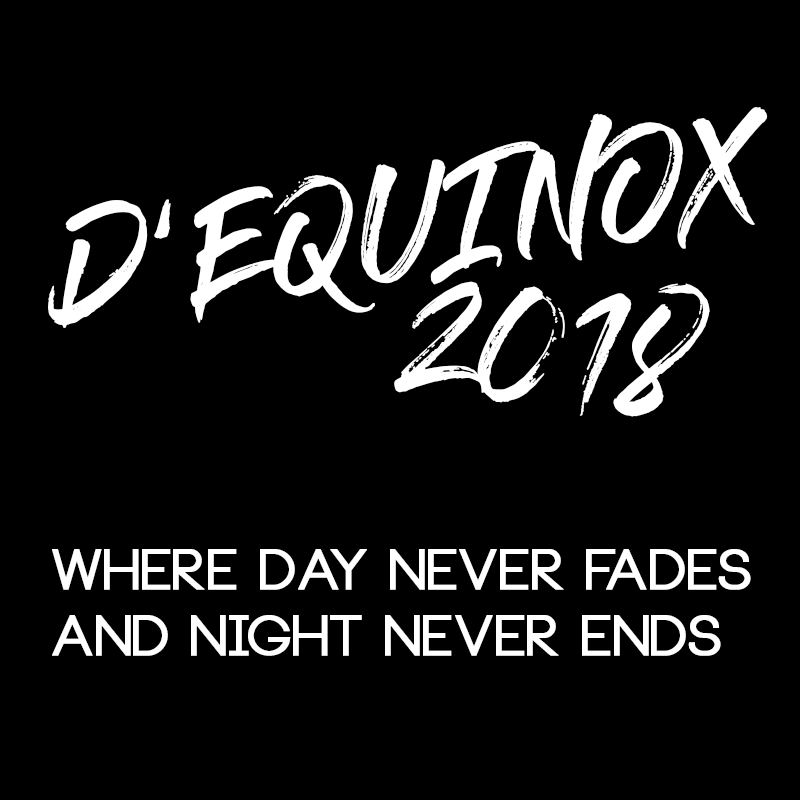
<style>
.page{position:relative;width:800px;height:800px;background:#000000}
.page>*{position:absolute;margin:0}
.t1{font:108.5px "GlossAndBloom";letter-spacing:-0.025em;color:#ffffff;font-weight:bold}
.t2{font:118.3px "GlossAndBloom";letter-spacing:-0.025em;color:#ffffff;font-weight:bold;scale:1.03 1}
.t3{font:55.4px "Neou-Bold";letter-spacing:-0.025em;color:#ffffff;font-weight:bold;scale:1.03 1}
</style>
<div class="page">
<p class="t1" style="left:48px;top:107px;width:720px;height:221px;rotate:-9deg">D’EQUINOX</p>
<p class="t2" style="left:394px;top:281px;width:316px;height:136px;rotate:5deg">2018</p>
<p class="t3" style="left:52px;top:549px;width:699px;height:107px">Where Day Never fades<br>and night never ends</p>
</div>
